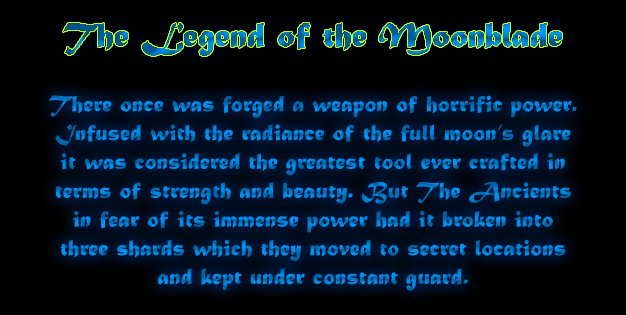
<style>
.page{position:relative;width:626px;height:315px;background:#000000}
.page>*{position:absolute;margin:0}
.t1{font:36px "MaturaMTScriptCapitals"}
.t2{font:24px "MaturaMTScriptCapitals"}
</style>
<div class="page">
<p class="t1" style="left:63px;top:23px;width:499px;height:33px">The Legend of the Moonblade</p>
<p class="t2" style="left:49px;top:95px;width:528px;height:196px;text-align:center">There once was forged a weapon of horrific power.<br>Infused with the radiance of the full moon’s glare<br>it was considered the greatest tool ever crafted in<br>terms of strength and beauty. But The Ancients<br>in fear of its immense power had it broken into<br>three shards which they moved to secret locations<br>and kept under constant guard.</p>
</div>
